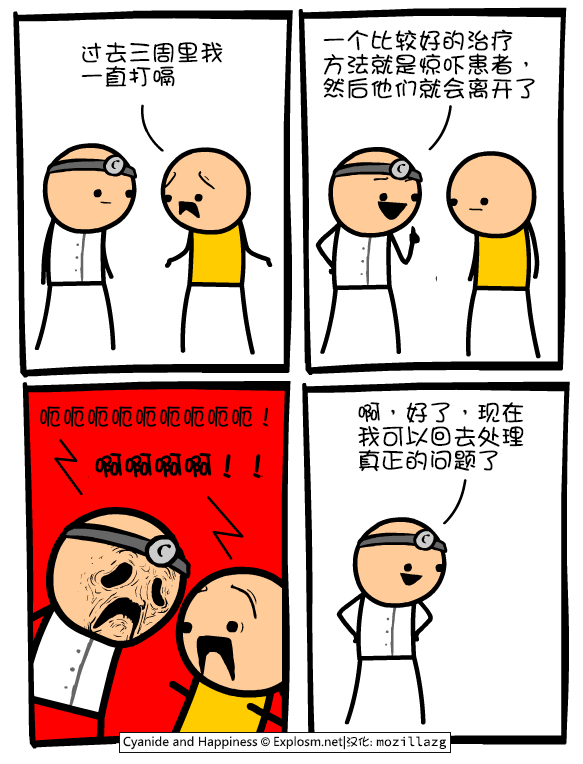
<style>
.page{position:relative;width:583px;height:764px;background:#ffffff}
.page>*{position:absolute;margin:0}
.t1{font:24px/24px "DFGirl";color:#000000}
.t2{font:24px "DFGirl";color:#000000}
.t3{font:29px "DFGirl";color:#000000;font-weight:bold}
</style>
<div class="page">
<p class="t1" style="left:323px;top:29px;width:212px;height:71px">一个比较好的治疗<br>方法就是惊吓患者，<br>然后他们就会离开了</p>
<p class="t1" style="left:81px;top:41px;width:142px;height:46px">过去三周里我<br>一直打嗝</p>
<p class="t2" style="left:40px;top:406px;width:229px;height:21px">呃呃呃呃呃呃呃呃呃！</p>
<p class="t1" style="left:358px;top:402px;width:166px;height:70px">啊，好了，现在<br>我可以回去处理<br>真正的问题了</p>
<p class="t3" style="left:95px;top:453px;width:166px;height:26px">啊啊啊啊！！</p>
</div>
